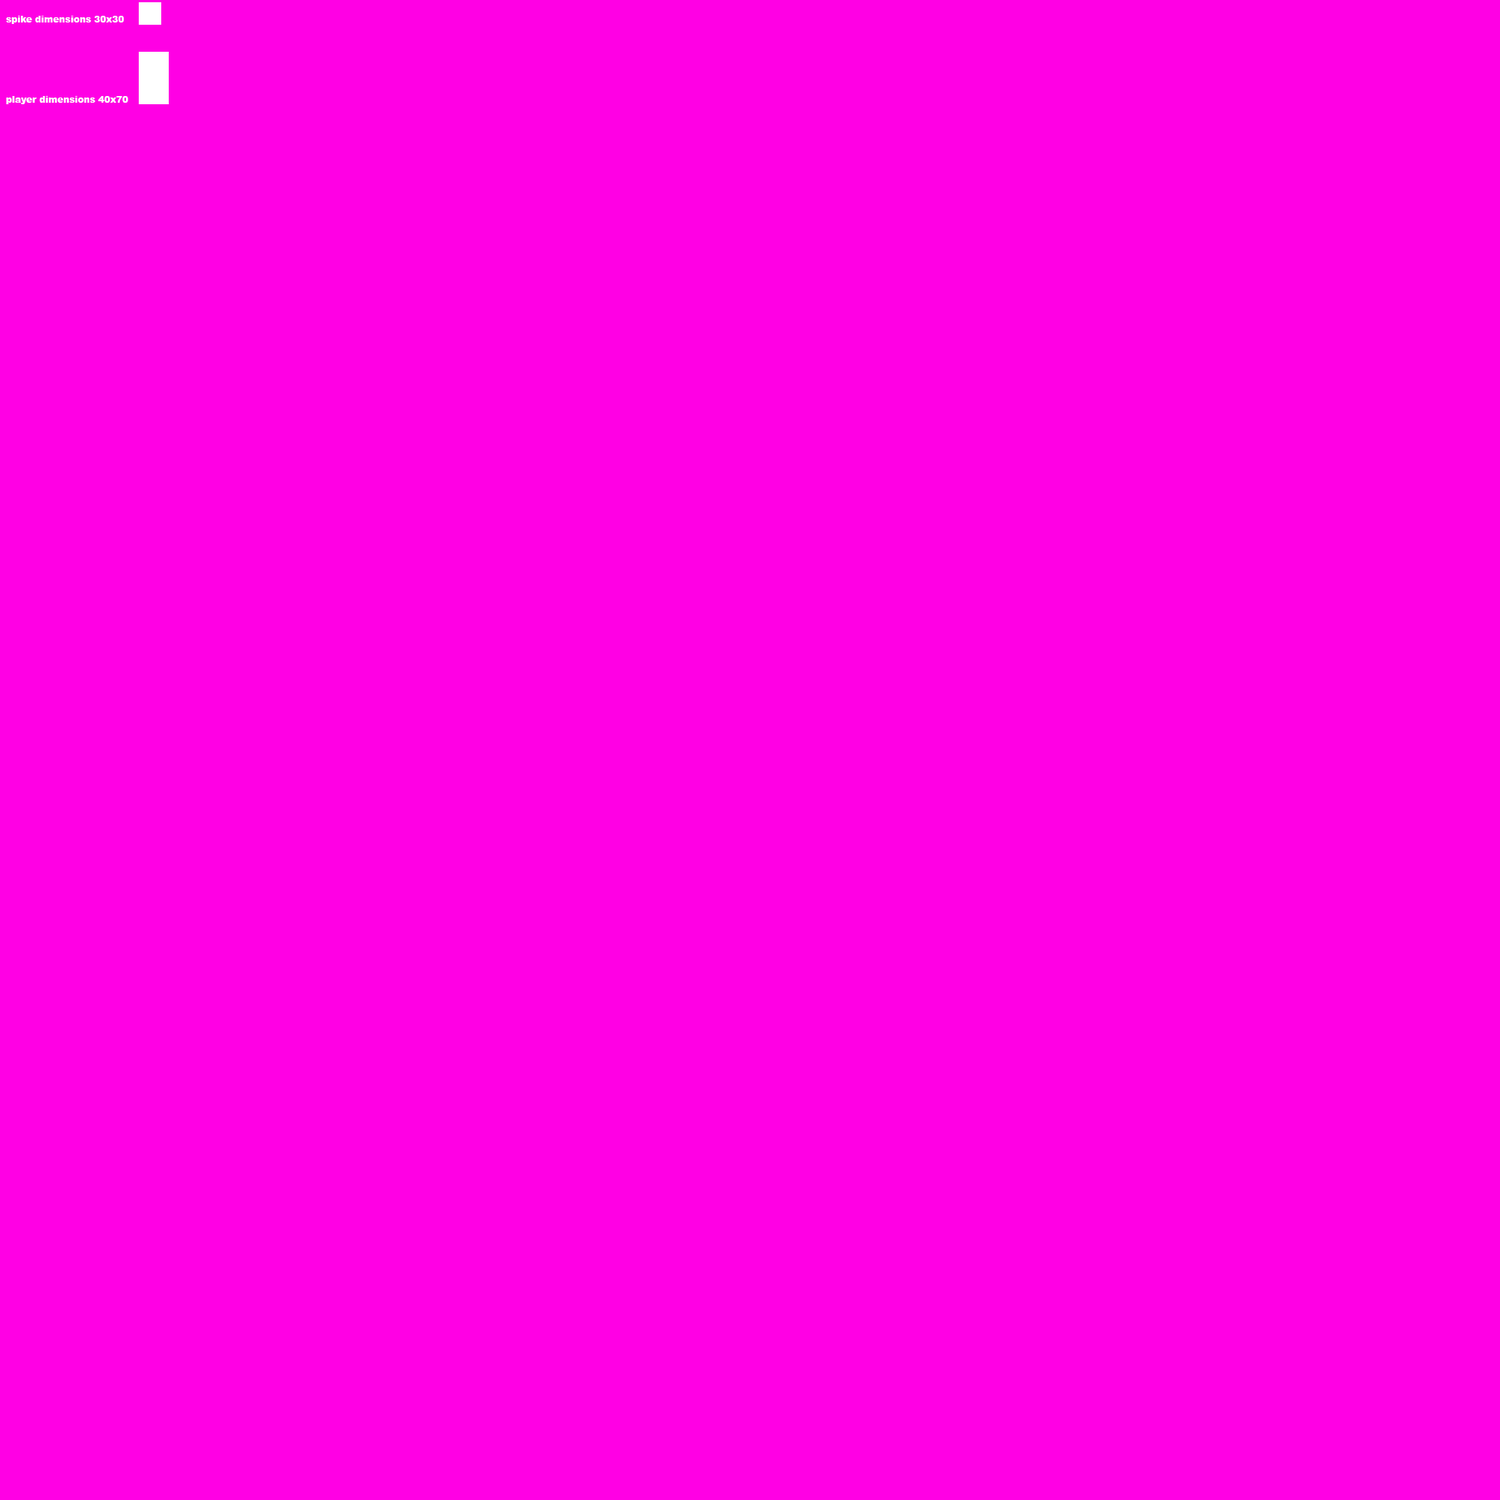
<style>
.page{position:relative;width:1500px;height:1500px;background:#ff00e4}
.page>*{position:absolute;margin:0}
.t1{font:9px "Arial-Black";color:#ffffff}
</style>
<div class="page">
<p class="t1" style="left:6px;top:16px;width:118px;height:8px">spike dimensions 30x30</p>
<p class="t1" style="left:6px;top:96px;width:122px;height:8px">player dimensions 40x70</p>
</div>
